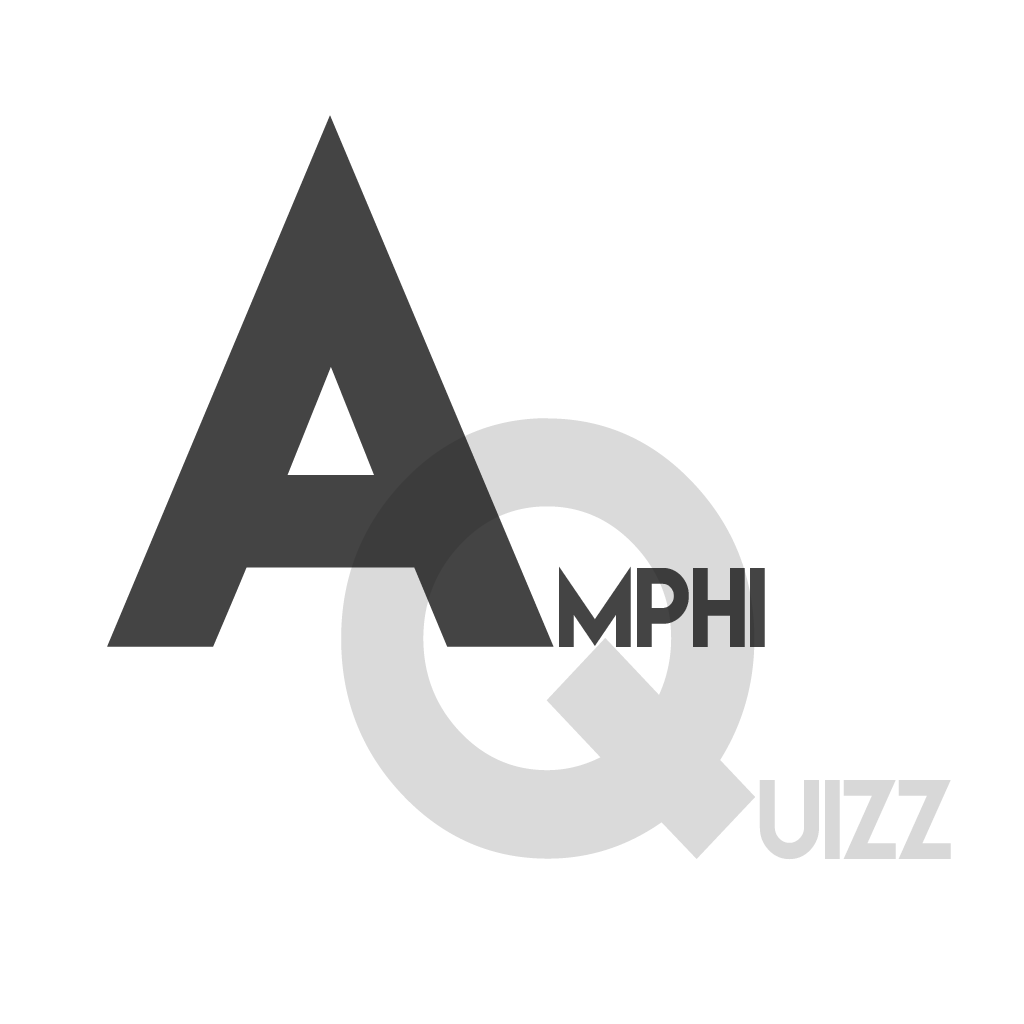
<style>
.page{position:relative;width:1024px;height:1024px;background:#ffffff}
.page>*{position:absolute;margin:0}
.t1{font:663.8px "LemonMilk";letter-spacing:-0.02em;color:#444444;scale:0.94 1}
.t2{font:100px "LemonMilk";letter-spacing:-0.02em;color:#444444;scale:0.94 1}
.t3{font:100px "LemonMilk";letter-spacing:-0.02em;color:#cecece;scale:0.94 1}
</style>
<div class="page">
<p class="t1" style="left:107px;top:115px;width:447px;height:532px">A</p>
<p class="t2" style="left:559px;top:566px;width:206px;height:81px">mphi</p>
<p class="t3" style="left:759px;top:780px;width:192px;height:80px;opacity:0.8">uizz</p>
</div>
